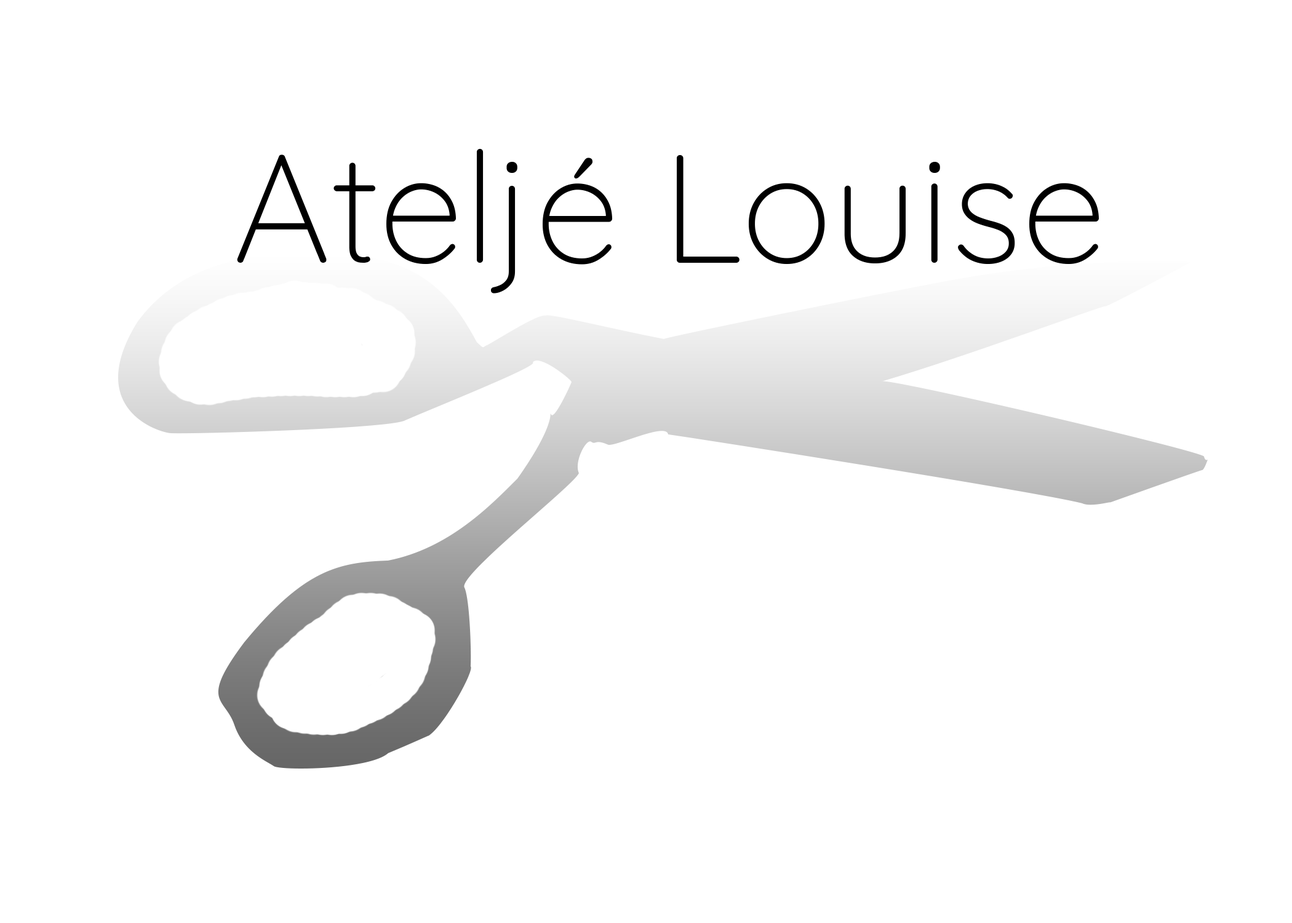
<style>
.page{position:relative;width:1292px;height:923px;background:#ffffff}
.page>*{position:absolute;margin:0}
.t1{font:36.9px "Quicksand-Light";color:#000000}
</style>
<div class="page">
<p class="t1" style="left:237px;top:149px;width:862px;height:144px">Ateljé Louise</p>
</div>
